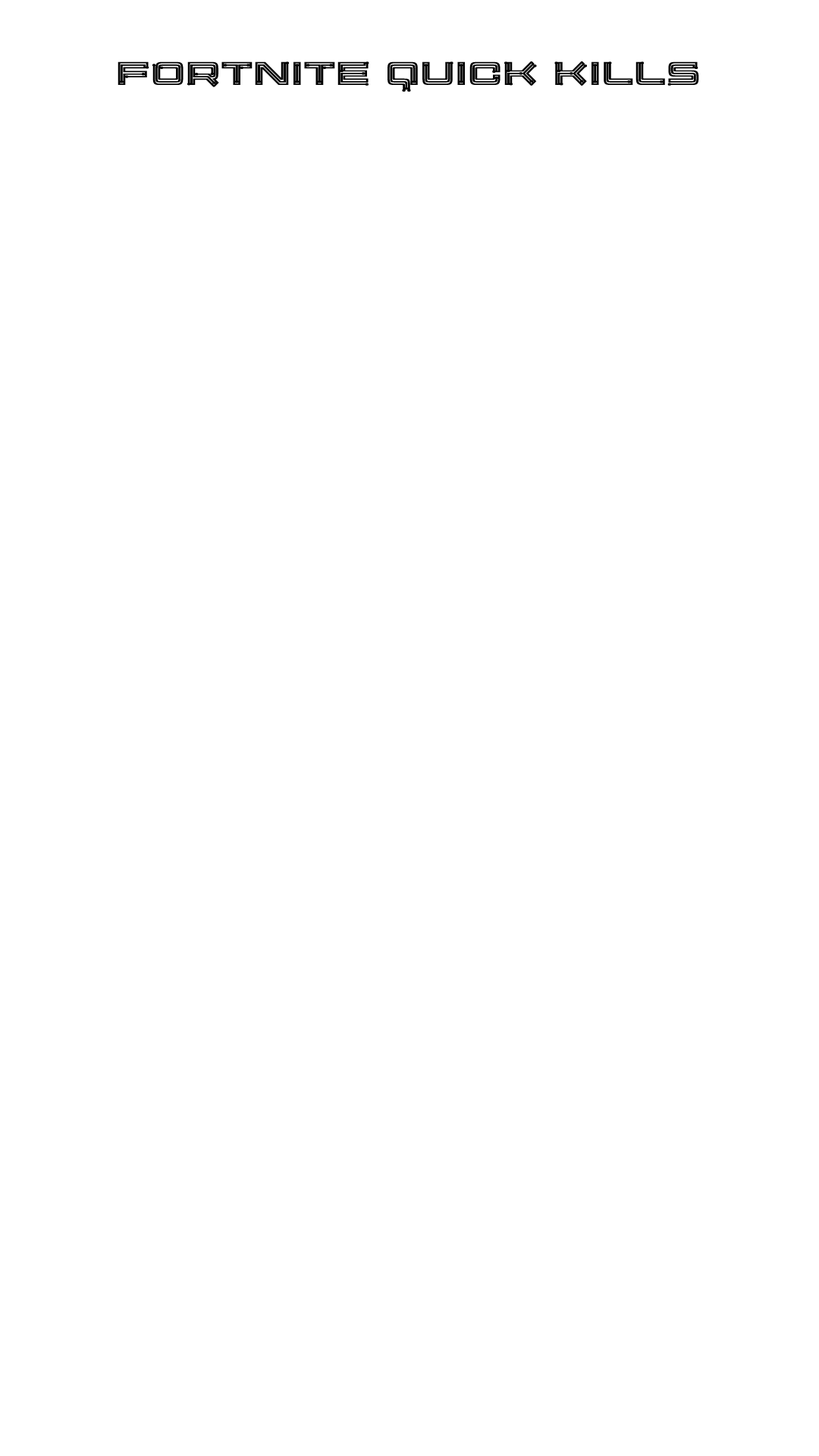
<style>
.page{position:relative;width:819px;height:1456px;background:#ffffff}
.page>*{position:absolute;margin:0}
.t1{font:31.8px "Membra";letter-spacing:0.029em;color:#000000;text-transform:uppercase;font-weight:bold}
</style>
<div class="page">
<p class="t1" style="left:118px;top:61px;width:581px;height:31px">Fortnite Quick Kills</p>
</div>
